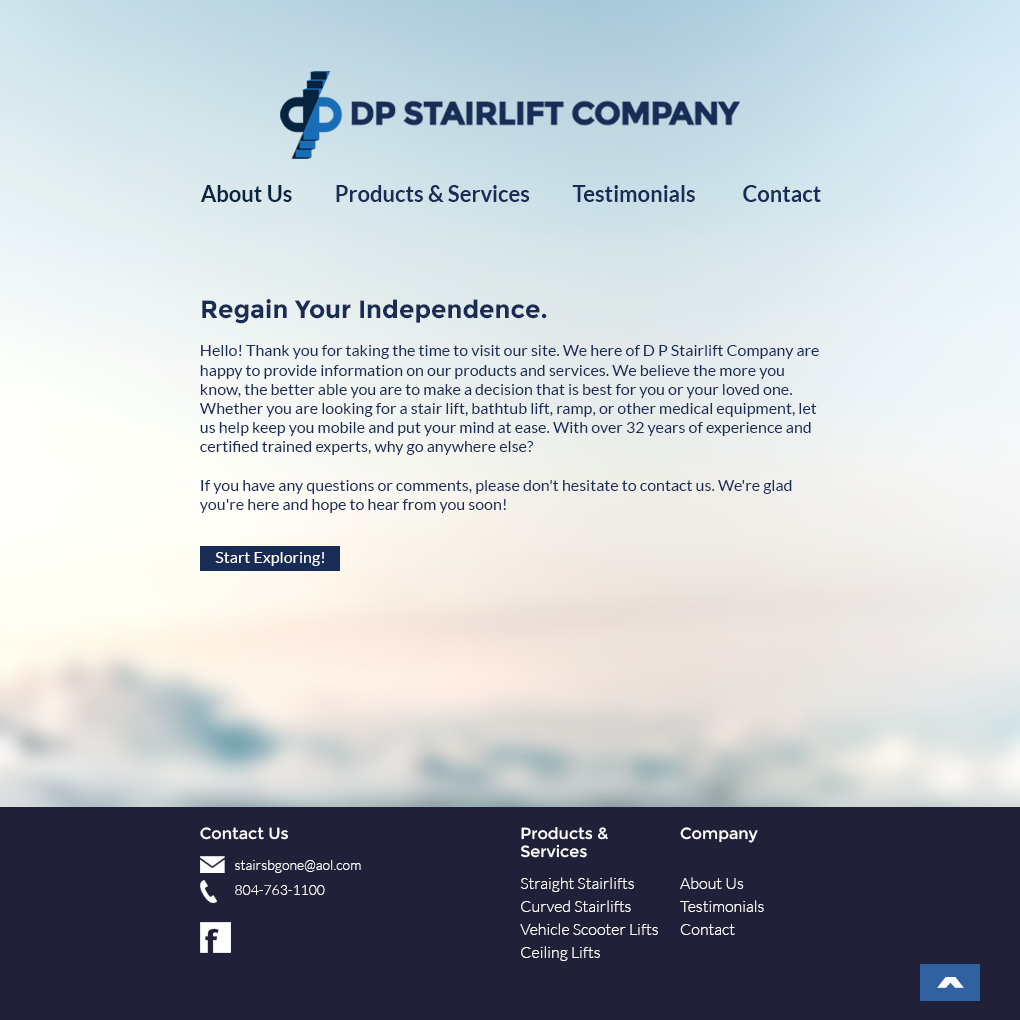
<style>
.page{position:relative;width:1020px;height:1020px}
.page>*{position:absolute;margin:0}
.t1{font:22px "Lato-Bold";color:#192c56}
.t2{font:22px "Lato-Bold";color:#092540}
.t3{font:16px "Lato-Regular";color:#192c56}
.t4{font:25px "Montserrat-Bold";color:#192c56}
.t5{font:16px "Lato-Regular";color:#ffffff}
.t6{font:16px "Montserrat-Regular";color:#ffffff}
.t7{font:16px/23px "Lato-Light";color:#ffffff}
.t8{font:16px/20px "Montserrat-Regular";color:#ffffff}
.t9{font:16px/18px "Montserrat-Regular";color:#ffffff}
.t10{font:16px/16px "Lato-Light";color:#ffffff}
.t11{font:16px/16px "Montserrat-Regular";color:#ffffff}
.t12{font:16px/34px "Lato-Light";color:#ffffff}
.t13{font:14px/6px "Lato-Light";color:#ffffff}
.t14{font:14px/25px "Lato-Light";color:#ffffff}
.t15{font:60px "Montserrat-Bold";color:#ffffff}
</style>
<div class="page">
<p class="t1" style="left:200px;top:185px;width:621px;height:17px"><span class="t2">About Us</span>          Products &amp; Services          Testimonials           Contact</p>
<p class="t3" style="left:200px;top:299px;width:619px;height:214px"><span class="t4">Regain Your Independence.<br><br></span>Hello! Thank you for taking the time to visit our site. We here of D P Stairlift Company are happy to provide information on our products and services. We believe the more you know, the better able you are to make a decision that is best for you or your loved one. Whether you are looking for a stair lift, bathtub lift, ramp, or other medical equipment, let us help keep you mobile and put your mind at ease. With over 32 years of experience and certified trained experts, why go anywhere else?<br><br>If you have any questions or comments, please don't hesitate to contact us. We're glad you're here and hope to hear from you soon!</p>
<p class="t5" style="left:215px;top:552px;width:109px;height:14px">Start Exploring!</p>
<p class="t6" style="left:200px;top:827px;width:88px;height:13px">Contact Us</p>
<p class="t7" style="left:520px;top:827px;width:138px;height:134px"><span class="t8">Products &amp; <br></span><span class="t9">Services<br><br></span><span class="t10">Straight Stairlifts<br></span>Curved Stairlifts<br>Vehicle Scooter Lifts<br>Ceiling Lifts</p>
<p class="t7" style="left:680px;top:827px;width:84px;height:108px"><span class="t11">Company<br><br></span><span class="t12">About Us <br></span>Testimonials<br>Contact</p>
<p class="t13" style="left:235px;top:860px;width:126px;height:35px">stairsbgone@aol.com<br><span class="t14">804-763-1100</span></p>
<p class="t15" style="left:937px;top:977px;width:27px;height:11px">^</p>
</div>
